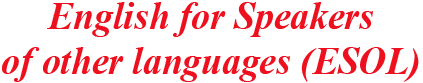
<style>
.page{position:relative;width:423px;height:83px;background:#ffffff}
.page>*{position:absolute;margin:0}
.t1{font:37.5px "TimesNewRomanPS-BoldItalicMT";color:#ed1120}
</style>
<div class="page">
<p class="t1" style="left:2px;top:2px;width:417px;height:80px;text-align:center">English for Speakers<br>of other languages (ESOL)</p>
</div>
